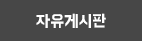
<style>
.page{position:relative;width:142px;height:41px;background:#474747}
.page>*{position:absolute;margin:0}
.t1{font:16.7px "BMHANNA11yrsold";color:#ffffff}
</style>
<div class="page">
<p class="t1" style="left:36px;top:13px;width:70px;height:15px">자유게시판</p>
</div>
